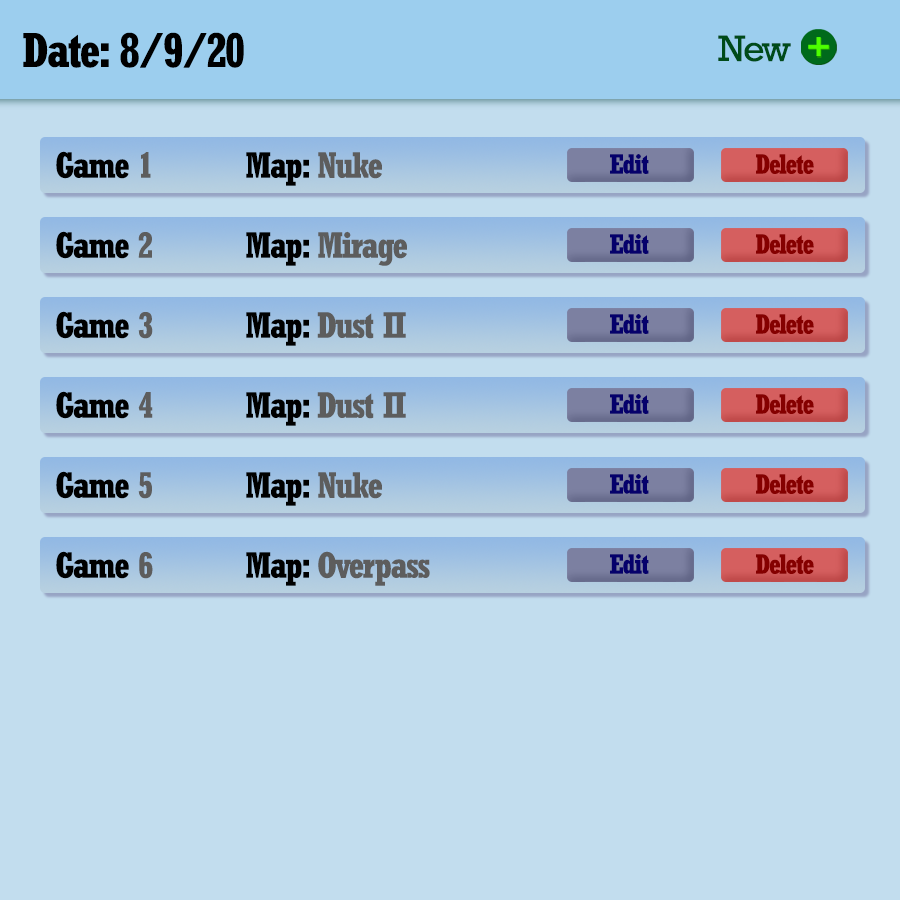
<style>
.page{position:relative;width:900px;height:900px;background:#c2ddee}
.page>*{position:absolute;margin:0}
.t1{font:48px "Rockwell-CondensedBold";letter-spacing:-0.05em;color:#000000}
.t2{font:37.2px "Rockwell";letter-spacing:-0.05em;color:#004b19}
.t3{font:36px "Rockwell-CondensedBold";letter-spacing:-0.05em;color:#000000}
.t4{font:36px "Rockwell-CondensedBold";letter-spacing:-0.05em;color:#5d5d5d}
.t5{font:27.1px "Rockwell-CondensedBold";letter-spacing:-0.05em;color:#05006b}
.t6{font:27.1px "Rockwell-CondensedBold";letter-spacing:-0.05em;color:#850000}
</style>
<div class="page">
<p class="t1" style="left:23px;top:32px;width:221px;height:36px">Date: 8/9/20</p>
<p class="t2" style="left:718px;top:35px;width:73px;height:27px">New</p>
<p class="t3" style="left:56px;top:151px;width:95px;height:28px">Game <span class="t4">1</span></p>
<p class="t3" style="left:246px;top:152px;width:136px;height:34px">Map: <span class="t4">Nuke</span></p>
<p class="t5" style="left:610px;top:154px;width:39px;height:20px">Edit</p>
<p class="t6" style="left:756px;top:154px;width:58px;height:20px">Delete</p>
<p class="t3" style="left:56px;top:231px;width:96px;height:28px">Game <span class="t4">2</span></p>
<p class="t4" style="left:246px;top:231px;width:161px;height:35px"><span class="t3">Map: </span>Mirage</p>
<p class="t5" style="left:610px;top:234px;width:39px;height:20px">Edit</p>
<p class="t6" style="left:756px;top:234px;width:58px;height:20px">Delete</p>
<p class="t3" style="left:56px;top:311px;width:97px;height:28px">Game <span class="t4">3</span></p>
<p class="t4" style="left:246px;top:312px;width:160px;height:34px"><span class="t3">Map: </span>Dust II</p>
<p class="t5" style="left:610px;top:314px;width:39px;height:20px">Edit</p>
<p class="t6" style="left:756px;top:314px;width:58px;height:20px">Delete</p>
<p class="t3" style="left:56px;top:391px;width:97px;height:28px">Game <span class="t4">4</span></p>
<p class="t4" style="left:246px;top:392px;width:160px;height:34px"><span class="t3">Map: </span>Dust II</p>
<p class="t5" style="left:610px;top:394px;width:39px;height:20px">Edit</p>
<p class="t6" style="left:756px;top:394px;width:58px;height:20px">Delete</p>
<p class="t3" style="left:56px;top:471px;width:96px;height:28px">Game <span class="t4">5</span></p>
<p class="t3" style="left:246px;top:472px;width:136px;height:34px">Map: <span class="t4">Nuke</span></p>
<p class="t5" style="left:610px;top:474px;width:39px;height:20px">Edit</p>
<p class="t6" style="left:756px;top:474px;width:58px;height:20px">Delete</p>
<p class="t3" style="left:56px;top:551px;width:97px;height:28px">Game <span class="t4">6</span></p>
<p class="t4" style="left:246px;top:551px;width:184px;height:35px"><span class="t3">Map: </span>Overpass</p>
<p class="t5" style="left:610px;top:554px;width:39px;height:20px">Edit</p>
<p class="t6" style="left:756px;top:554px;width:58px;height:20px">Delete</p>
</div>
